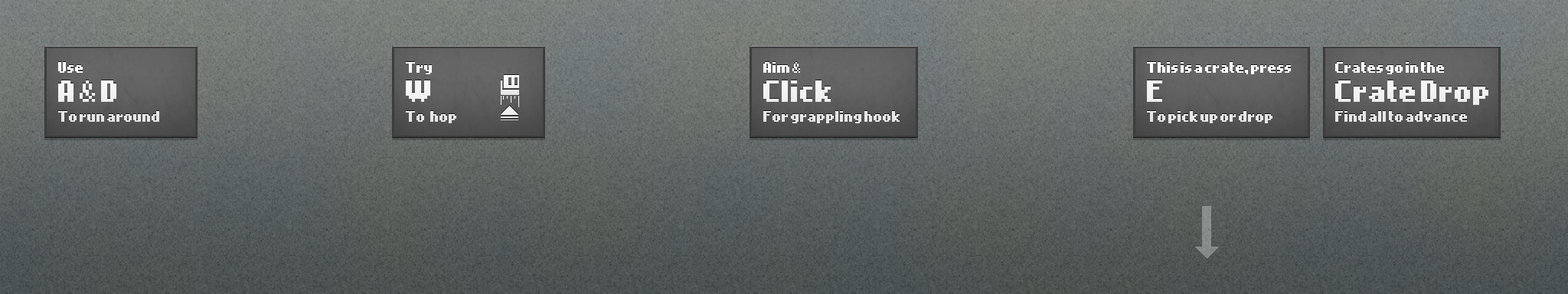
<style>
.page{position:relative;width:1568px;height:294px}
.page>*{position:absolute;margin:0}
.t1{font:12.2px/19.9px "Snakebold";color:#ffffff}
.t2{font:12.2px/45.9px "Snakebold";color:#ffffff}
.t3{font:24.5px/29.1px "Snakebold";color:#ffffff}
</style>
<div class="page">
<p class="t1" style="left:58px;top:62px;width:101px;height:60px"><span class="t2">Use <br></span><span class="t3">A &amp; D<br></span>To run around</p>
<p class="t1" style="left:406px;top:62px;width:50px;height:61px"><span class="t2">Try<br></span><span class="t3">W<br></span>To   hop</p>
<p class="t1" style="left:763px;top:62px;width:137px;height:61px"><span class="t2">Aim &amp;<br></span><span class="t3">Click<br></span>For grappling hook</p>
<p class="t2" style="left:1147px;top:62px;width:144px;height:61px">This is a crate, press<br><span class="t3">E<br></span><span class="t1">To pick up or drop</span></p>
<p class="t1" style="left:1335px;top:62px;width:153px;height:60px"><span class="t2">Crates go in the<br></span><span class="t3">Crate Drop<br></span>Find all to advance</p>
</div>
